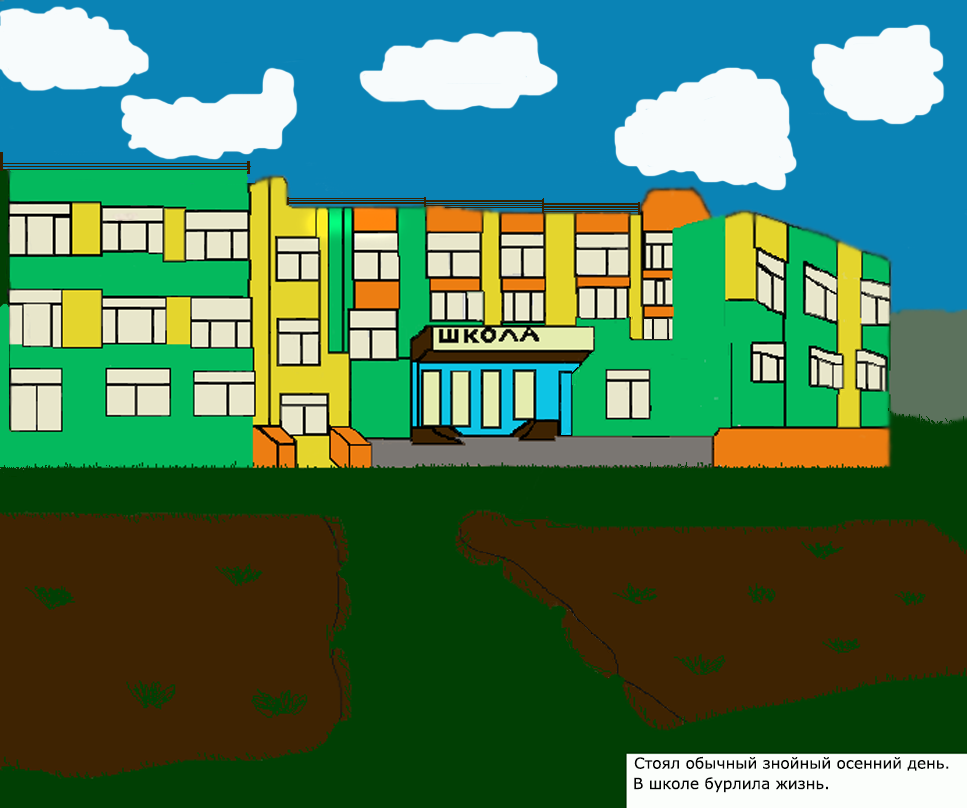
<style>
.page{position:relative;width:967px;height:808px}
.page>*{position:absolute;margin:0}
.t1{font:15.3px "MSReferenceSansSerif";color:#030303}
</style>
<div class="page">
<p class="t1" style="left:634px;top:756px;width:315px;height:15px">Стоял обычный знойный осенний день.</p>
<p class="t1" style="left:634px;top:777px;width:194px;height:16px">В школе бурлила жизнь.</p>
</div>
